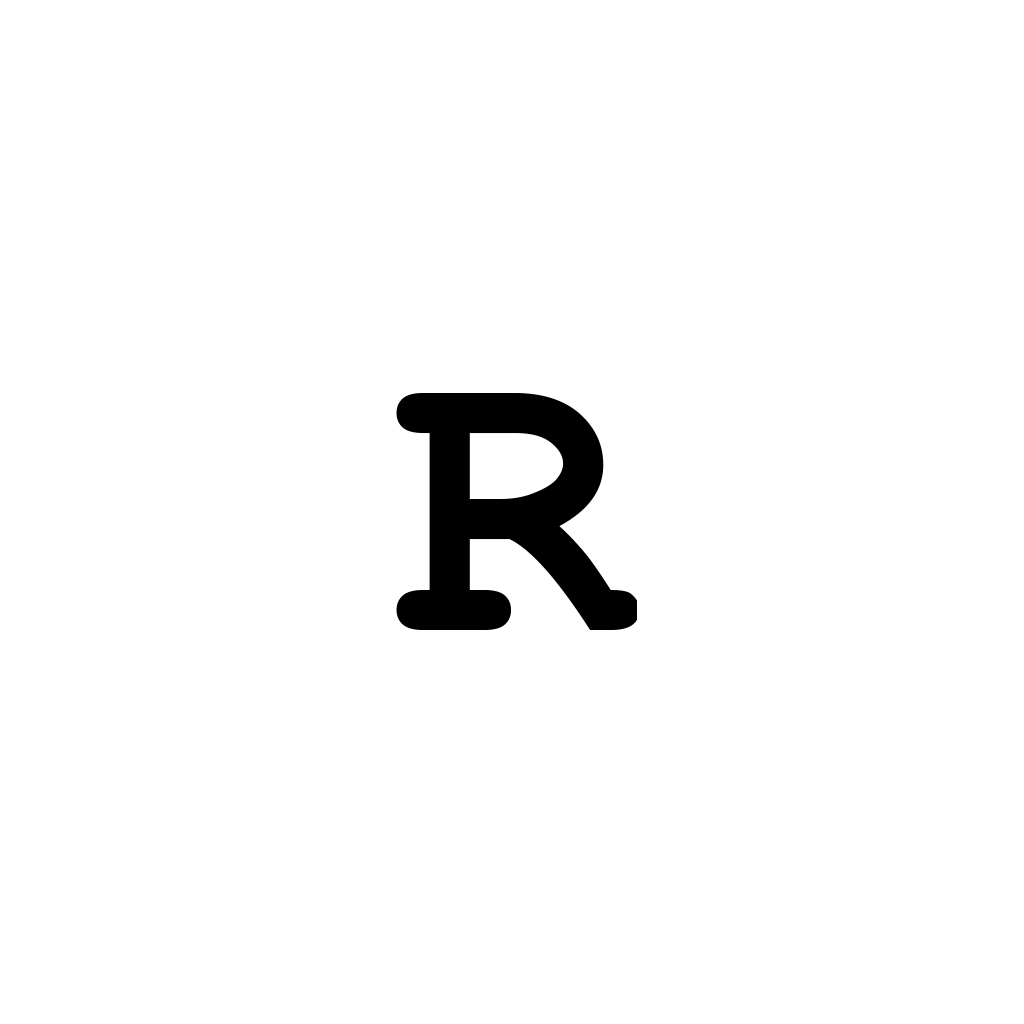
<style>
.page{position:relative;width:1024px;height:1024px;background:#ffffff}
.page>*{position:absolute;margin:0}
.t1{font:400px "CourierNewPS-BoldMT";color:#000000}
</style>
<div class="page">
<p class="t1" style="left:396px;top:393px;width:241px;height:237px">R</p>
</div>
